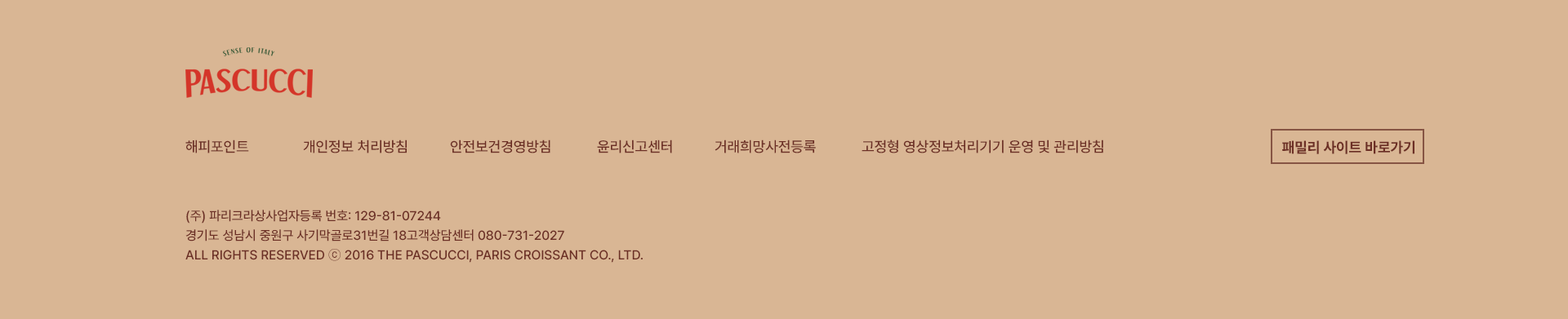
<style>
.page{position:relative;width:1568px;height:319px;background:#d9b694}
.page>*{position:absolute;margin:0}
.t1{font:14.7px "Pretendard-Medium";color:#6c2f25}
.t2{font:14.7px "Pretendard-Bold";color:#6c2f25}
.t3{font:13.1px/19.6px "Pretendard-Medium";color:#6c2f25}
.t4{font:13.1px/19.6px "Gulim";color:#6c2f25}
</style>
<div class="page">
<p class="t1" style="left:185px;top:140px;width:918px;height:14px">해피포인트  개인정보 처리방침  안전보건경영방침  윤리신고센터  거래희망사전등록  고정형 영상정보처리기기 운영 및 관리방침</p>
<p class="t2" style="left:1282px;top:140px;width:132px;height:14px">패밀리 사이트 바로가기</p>
<p class="t3" style="left:185px;top:210px;width:458px;height:53px">(주) 파리크라상사업자등록 번호: 129-81-07244<br>경기도 성남시 중원구 사기막골로31번길 18고객상담센터 080-731-2027<br>ALL RIGHTS RESERVED <span class="t4">ⓒ</span> 2016 THE PASCUCCI, PARIS CROISSANT CO., LTD.</p>
</div>
